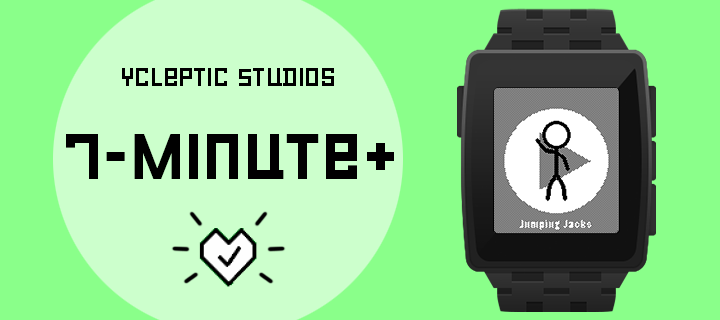
<style>
.page{position:relative;width:720px;height:320px;background:#8aff8a}
.page>*{position:absolute;margin:0}
.t1{font:25px "LECO1976-Regular";color:#000000}
.t2{font:65px "LECO1976-Regular";color:#000000}
</style>
<div class="page">
<p class="t1" style="left:122px;top:68px;width:212px;height:18px">Ycleptic Studios</p>
<p class="t2" style="left:66px;top:134px;width:328px;height:45px">7-Minute+</p>
</div>
